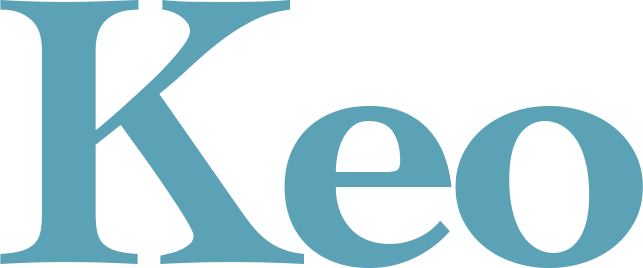
<style>
.page{position:relative;width:643px;height:268px;background:#ffffff}
.page>*{position:absolute;margin:0}
.t1{font:400px "Cochin-Bold";letter-spacing:-0.035em;color:#5ba2b7}
</style>
<div class="page">
<p class="t1" style="left:0px;top:0px;width:643px;height:268px">Keo</p>
</div>
